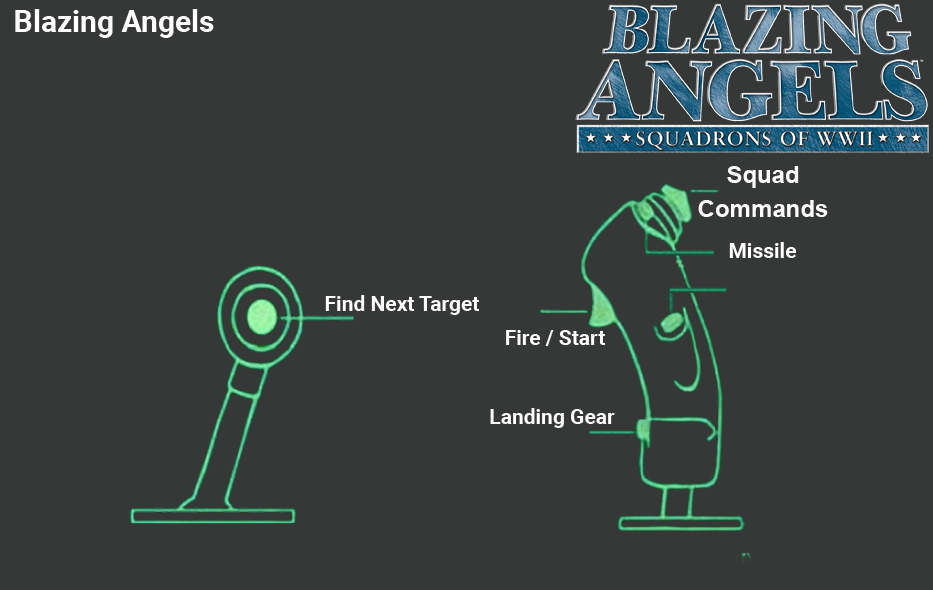
<style>
.page{position:relative;width:933px;height:590px;background:#363838}
.page>*{position:absolute;margin:0}
.t1{font:30px "Roboto-Bold";color:#ffffff}
.t2{font:24px/34px "Arial-BoldMT";color:#fefefe}
.t3{font:21px "Roboto-Bold";color:#ffffff}
</style>
<div class="page">
<p class="t1" style="left:15px;top:9px;width:199px;height:29px">Blazing Angels</p>
<p class="t2" style="left:698px;top:166px;width:130px;height:51px;text-align:center">Squad<br>Commands</p>
<p class="t3" style="left:729px;top:242px;width:67px;height:16px">Missile</p>
<p class="t3" style="left:325px;top:295px;width:154px;height:20px">Find Next Target</p>
<p class="t3" style="left:506px;top:330px;width:99px;height:16px">Fire / Start</p>
<p class="t3" style="left:490px;top:408px;width:125px;height:20px">Landing Gear</p>
</div>
